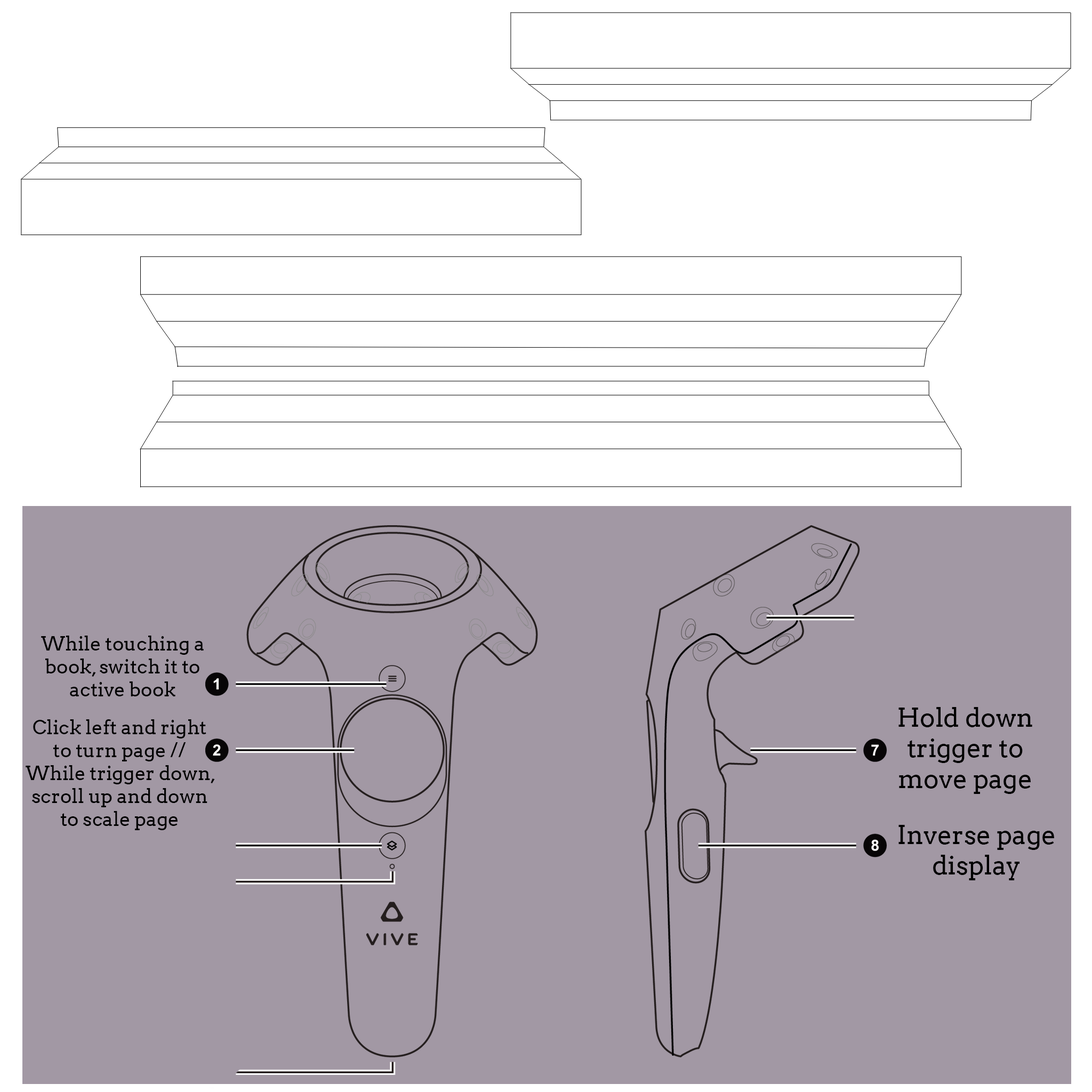
<style>
.page{position:relative;width:1092px;height:1092px;background:#a298a4}
.page>*{position:absolute;margin:0}
.t1{font:19.2px "Arvo";color:#000000}
.t2{font:25.6px "Arvo";color:#000000}
</style>
<div class="page">
<p class="t1" style="left:41px;top:636px;width:163px;height:60px;text-align:center">While touching a book, switch it to active book</p>
<p class="t2" style="left:898px;top:707px;width:134px;height:87px;text-align:center">Hold down trigger to move page</p>
<p class="t1" style="left:26px;top:719px;width:189px;height:111px;text-align:center">Click left and right to turn page //<br>While trigger down, scroll up and down to scale page</p>
<p class="t2" style="left:898px;top:825px;width:156px;height:55px;text-align:center">Inverse page display</p>
</div>
